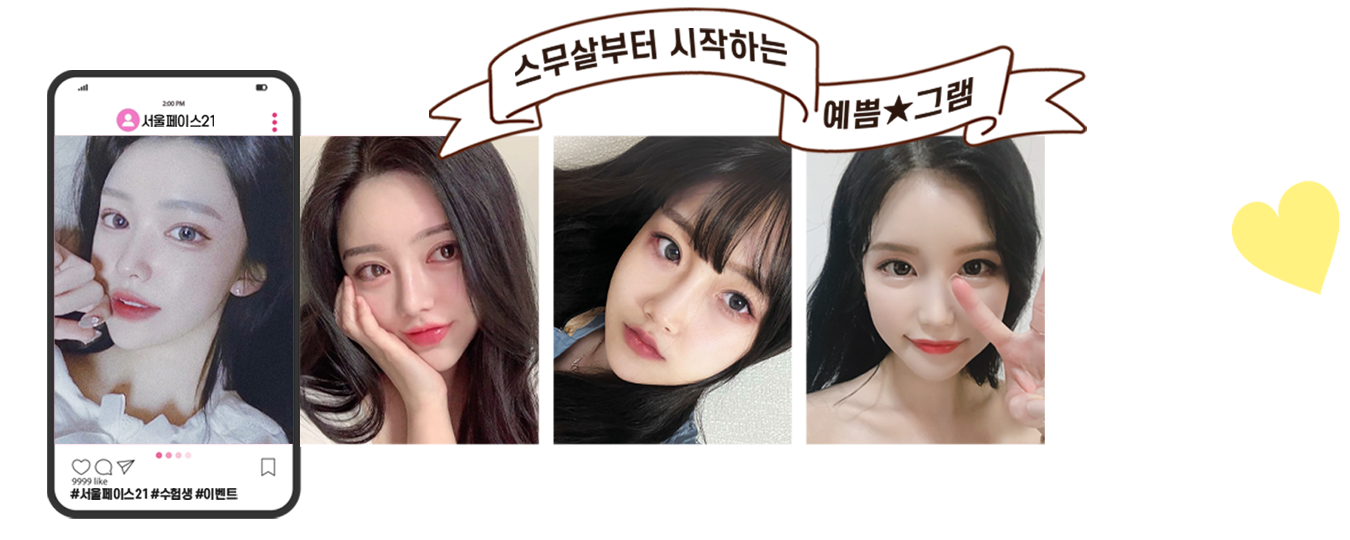
<style>
.page{position:relative;width:1350px;height:540px;background:#ffffff}
.page>*{position:absolute;margin:0}
.t1{font:31.9px "CoreGothicE-6Bold";color:#2b160e;scale:0.97 1}
.t2{font:31.2px "CoreGothicE-6Bold";color:#2b160e;scale:1.04 1}
.t3{font:13.7px "S-CoreDream-4Regular";letter-spacing:-0.06em;color:#000000;text-transform:uppercase;scale:0.97 1}
.t4{font:12.6px "S-CoreDream-6Bold";letter-spacing:-0.06em;color:#191919;text-transform:uppercase;scale:0.97 1}
</style>
<div class="page">
<p class="t1" style="left:515px;top:28px;width:272px;height:59px;rotate:-5deg">스무살부터 시작하는</p>
<p class="t2" style="left:823px;top:77px;width:151px;height:53px;rotate:-9deg">예쁨★그램</p>
<p class="t3" style="left:141px;top:114px;width:73px;height:13px">서울페이스21</p>
<p class="t4" style="left:70px;top:488px;width:168px;height:12px">#서울페이스21 #수험생 #이벤트</p>
</div>
